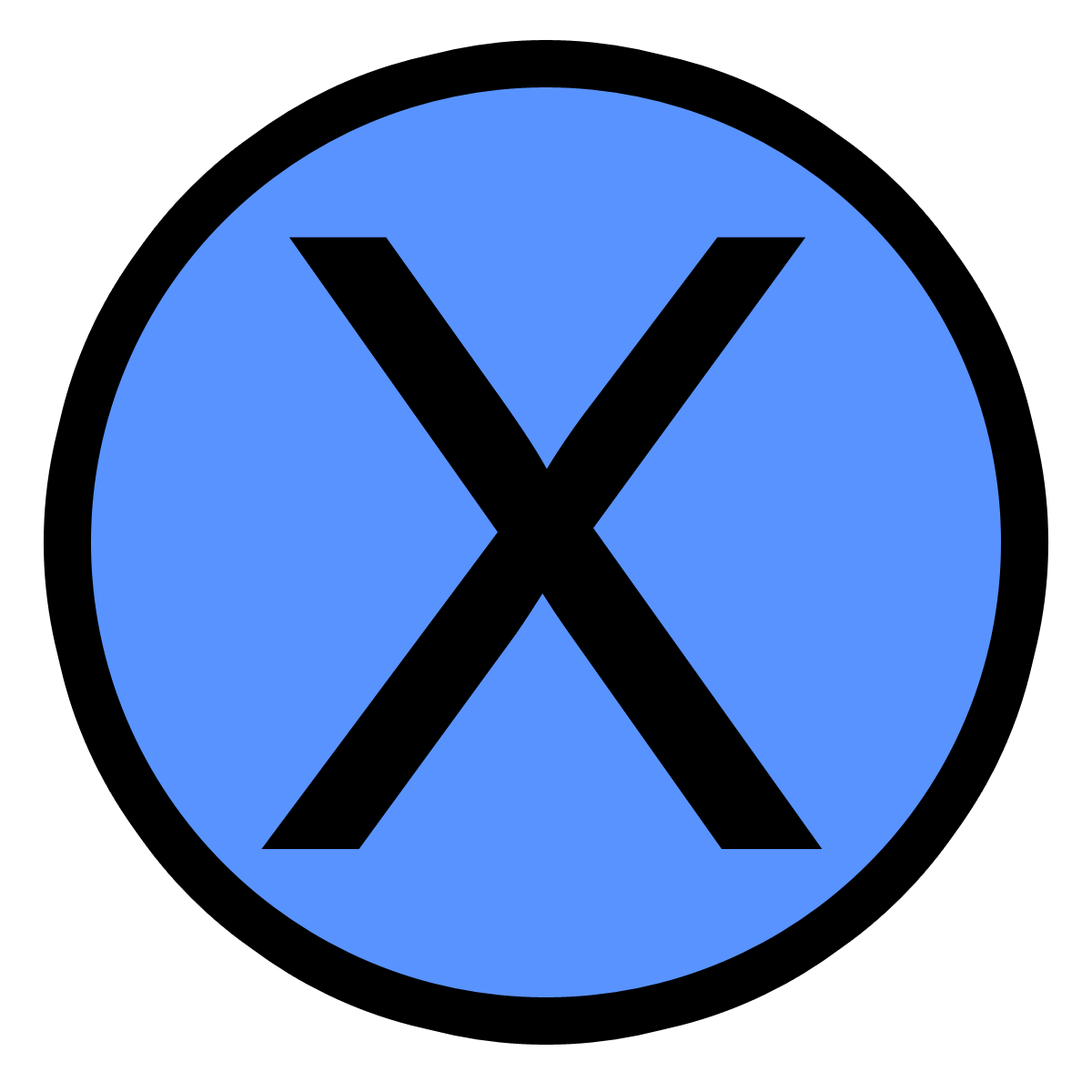
<style>
.page{position:relative;width:1092px;height:1092px;background:#5993ff}
.page>*{position:absolute;margin:0}
.t1{font:853.1px "ArialMT";color:#000000}
</style>
<div class="page">
<p class="t1" style="left:261px;top:237px;width:562px;height:612px">X</p>
</div>
